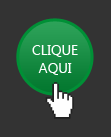
<style>
.page{position:relative;width:111px;height:137px;background:#333333}
.page>*{position:absolute;margin:0}
.t1{font:14px/18px "Ebrima";color:#ffffff}
</style>
<div class="page">
<p class="t1" style="left:32px;top:45px;width:46px;height:30px;text-align:center">CLIQUE<br>AQUI</p>
</div>
